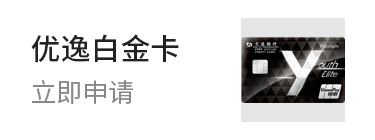
<style>
.page{position:relative;width:375px;height:140px;background:#ffffff}
.page>*{position:absolute;margin:0}
.t1{font:30px "SourceHanSansCN-Medium";color:#222222}
.t2{font:26px "SourceHanSansCN-Regular";color:#888888}
</style>
<div class="page">
<p class="t1" style="left:31px;top:34px;width:148px;height:29px">优逸白金卡</p>
<p class="t2" style="left:32px;top:80px;width:101px;height:24px">立即申请</p>
</div>
